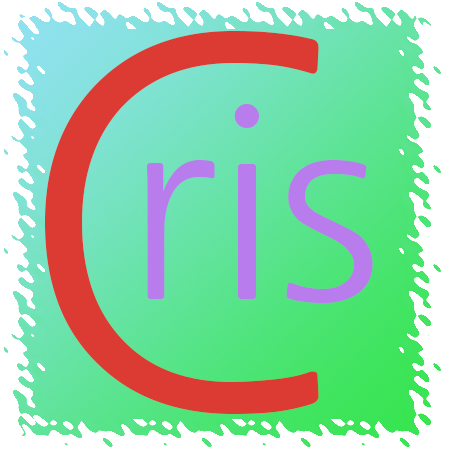
<style>
.page{position:relative;width:450px;height:450px}
.page>*{position:absolute;margin:0}
.t1{font:500px "NanumGothic";color:#dc3b33}
.t2{font:250px "NanumGothic";color:#b97ced}
</style>
<div class="page">
<p class="t1" style="left:45px;top:31px;width:274px;height:383px">C</p>
<p class="t2" style="left:147px;top:104px;width:226px;height:199px">ris</p>
</div>
